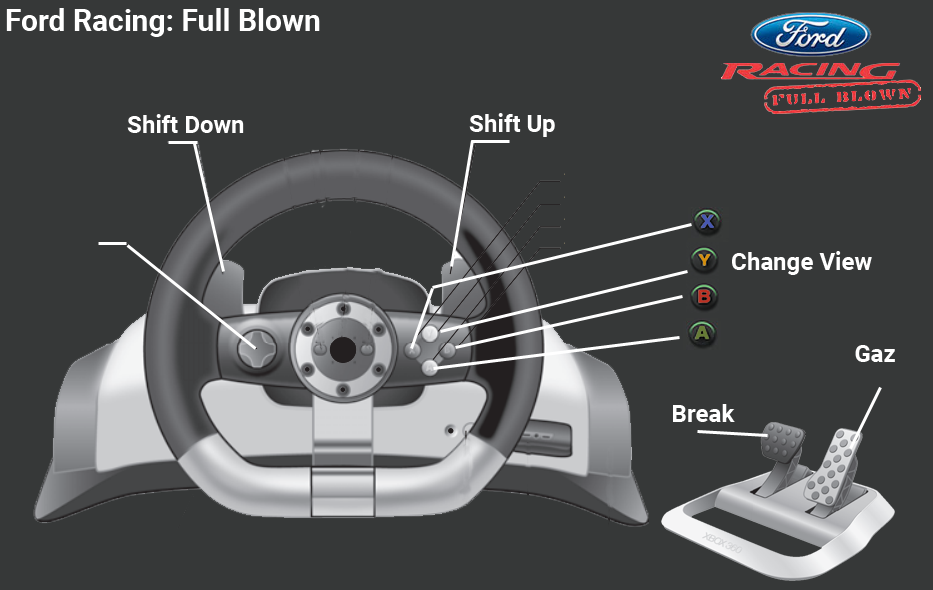
<style>
.page{position:relative;width:933px;height:590px;background:#363838}
.page>*{position:absolute;margin:0}
.t1{font:30px "Roboto-Bold";color:#ffffff}
.t2{font:24px "Roboto-Bold";color:#ffffff}
</style>
<div class="page">
<p class="t1" style="left:6px;top:8px;width:314px;height:29px">Ford Racing: Full Blown</p>
<p class="t2" style="left:469px;top:113px;width:86px;height:24px">Shift Up</p>
<p class="t2" style="left:127px;top:114px;width:117px;height:19px">Shift Down</p>
<p class="t2" style="left:732px;top:251px;width:140px;height:24px">Change View</p>
<p class="t2" style="left:855px;top:345px;width:40px;height:17px">Gaz</p>
<p class="t2" style="left:673px;top:404px;width:62px;height:18px">Break</p>
</div>
